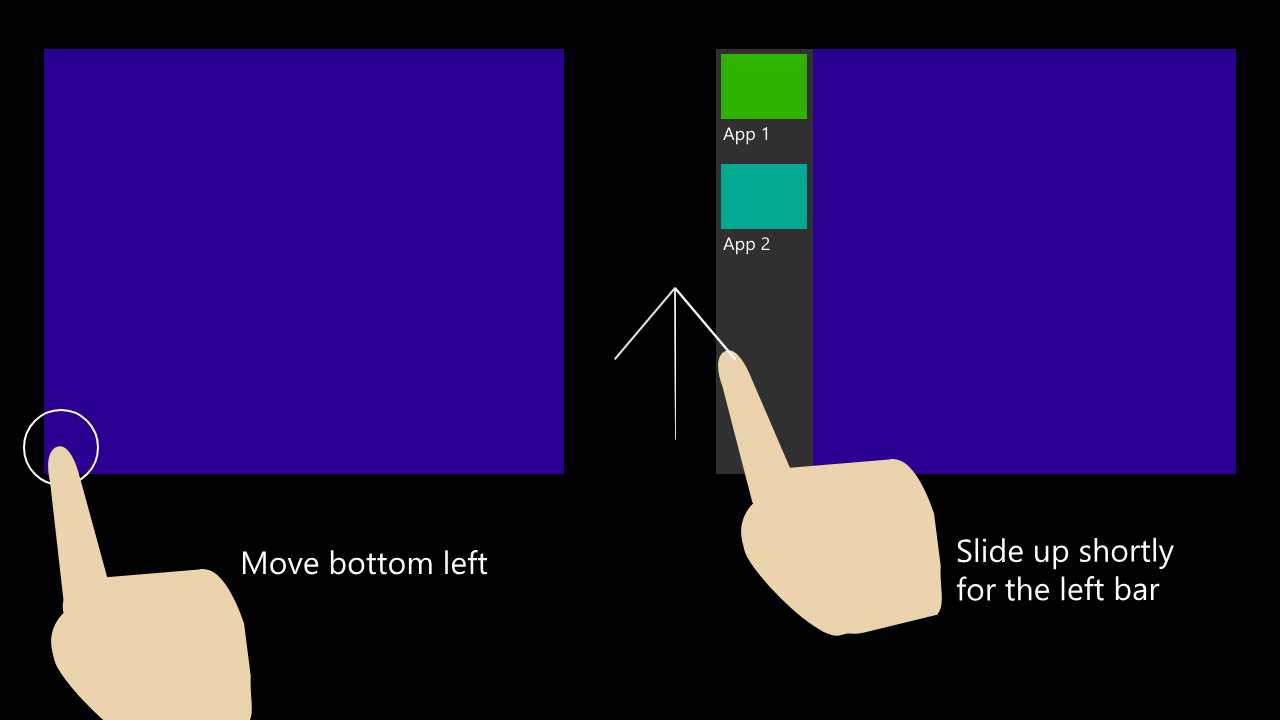
<style>
.page{position:relative;width:1280px;height:720px;background:#000000}
.page>*{position:absolute;margin:0}
.t1{font:18px "SegoeUI";color:#ffffff}
.t2{font:32px "SegoeUI";color:#ffffff}
</style>
<div class="page">
<p class="t1" style="left:723px;top:127px;width:45px;height:18px">App 1</p>
<p class="t1" style="left:723px;top:237px;width:47px;height:18px">App 2</p>
<p class="t2" style="left:956px;top:537px;width:218px;height:64px">Slide up shortly<br>for the left bar</p>
<p class="t2" style="left:242px;top:549px;width:246px;height:26px">Move bottom left</p>
</div>
